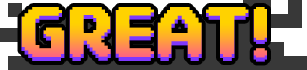
<style>
.page{position:relative;width:307px;height:70px;background:#383838}
.page>*{position:absolute;margin:0}
.t1{font:60px "DNFBitBitv2";text-transform:uppercase}
</style>
<div class="page">
<p class="t1" style="left:21px;top:7px;width:246px;height:55px">great!</p>
</div>
